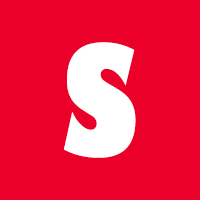
<style>
.page{position:relative;width:200px;height:200px;background:#eb0029}
.page>*{position:absolute;margin:0}
.t1{font:150px "GillSans-UltraBoldCondensed";letter-spacing:0.09em;color:#ffffff}
</style>
<div class="page">
<p class="t1" style="left:64px;top:42px;width:72px;height:116px">S</p>
</div>
